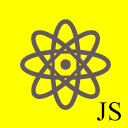
<style>
.page{position:relative;width:128px;height:128px;background:#ffff00}
.page>*{position:absolute;margin:0}
.t1{font:125px "SegoeUISymbol";color:#66595c}
.t2{font:27.8px "TimesNewRomanPSMT";color:#000000}
</style>
<div class="page">
<p class="t1" style="left:20px;top:19px;width:91px;height:91px">⚛</p>
<p class="t2" style="left:97px;top:102px;width:24px;height:19px">JS</p>
</div>
